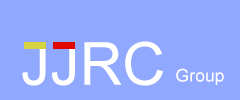
<style>
.page{position:relative;width:240px;height:100px;background:#91a8ff}
.page>*{position:absolute;margin:0}
.t1{font:59.3px "ArialMT";color:#ffffff}
.t2{font:17.6px "ArialMT";color:#ffffff}
</style>
<div class="page">
<p class="t1" style="left:22px;top:41px;width:141px;height:45px">JJRC</p>
<p class="t2" style="left:176px;top:68px;width:48px;height:17px">Group</p>
</div>
